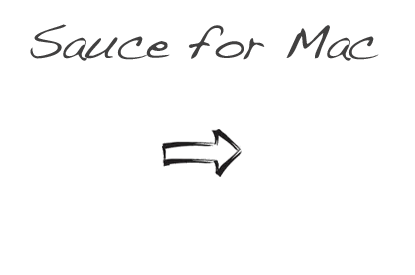
<style>
.page{position:relative;width:415px;height:275px;background:#ffffff}
.page>*{position:absolute;margin:0}
.t1{font:48px "Handwriting-Dakota";letter-spacing:-0.01em;color:#414040}
</style>
<div class="page">
<p class="t1" style="left:30px;top:24px;width:349px;height:37px">Sauce for Mac</p>
</div>
